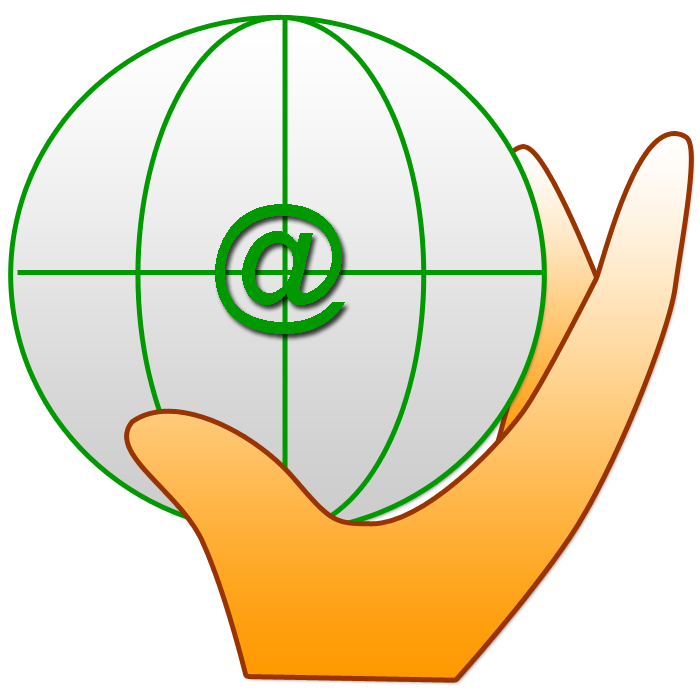
<style>
.page{position:relative;width:700px;height:700px;background:#ffffff}
.page>*{position:absolute;margin:0}
.t1{font:139px "ArialMT";color:#009900}
</style>
<div class="page">
<p class="t1" style="left:215px;top:204px;width:130px;height:130px">@</p>
</div>
